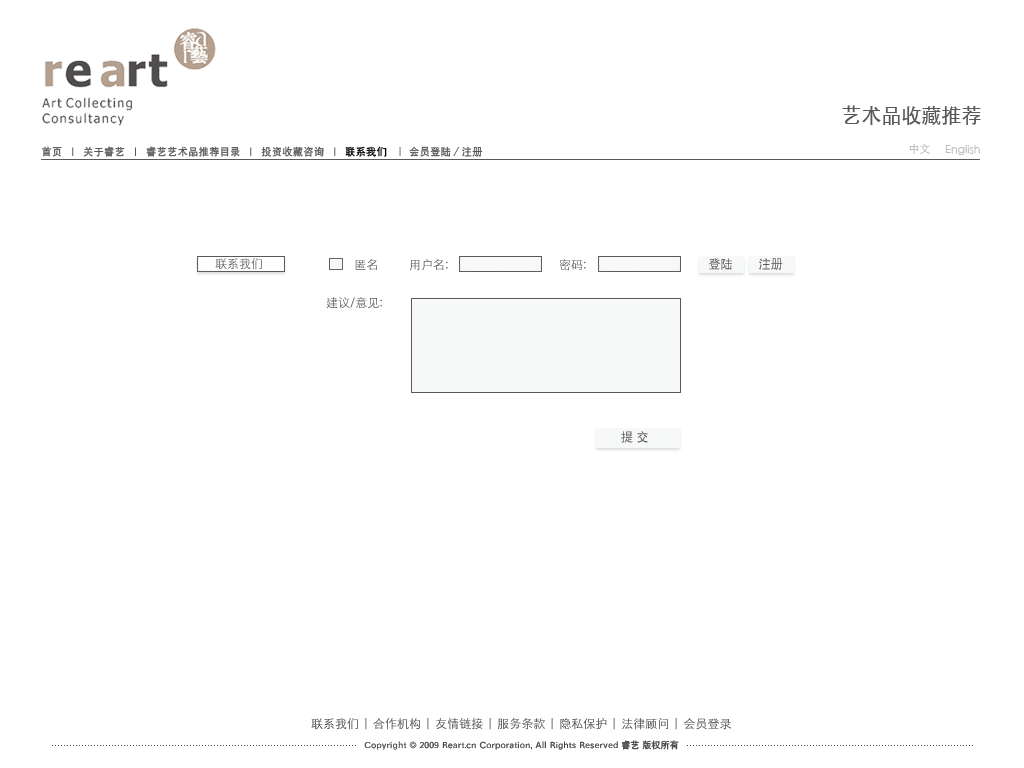
<style>
.page{position:relative;width:1024px;height:768px;background:#ffffff}
.page>*{position:absolute;margin:0}
.t1{font:20px "SIL-Hei-Med-Jian";color:#595757}
.t2{font:10px "SIL-Hei-Med-Jian";letter-spacing:0.05em;color:#5a5858}
.t3{font:10px "SIL-Hei-Med-Jian";letter-spacing:0.05em;color:#000000}
.t4{font:11px "STXihei";color:#bfbfbf}
.t5{font:12px "STXihei";color:#5a5858}
.t6{font:12px "STXihei"}
.t7{font:12px "SIL-Hei-Med-Jian";color:#5a5858}
.t8{font:12px "SIL-Hei-Med-Jian";letter-spacing:0.3em;color:#5a5858}
</style>
<div class="page">
<p class="t1" style="left:842px;top:105px;width:139px;height:20px">艺术品收藏推荐</p>
<p class="t2" style="left:41px;top:146px;width:442px;height:11px">首页  |  关于睿艺  |  睿艺艺术品推荐目录  |  投资收藏咨询  |  <span class="t3">联系我们</span>  ｜ 会员登陆／注册</p>
<p class="t4" style="left:909px;top:144px;width:21px;height:10px">中文</p>
<p class="t4" style="left:945px;top:145px;width:35px;height:10px">English</p>
<p class="t5" style="left:215px;top:258px;width:47px;height:12px">联系我们</p>
<p class="t5" style="left:355px;top:259px;width:22px;height:11px">匿名</p>
<p class="t5" style="left:410px;top:259px;width:38px;height:12px">用户名:</p>
<p class="t6" style="left:559px;top:259px;width:27px;height:12px">密码:</p>
<p class="t7" style="left:709px;top:258px;width:23px;height:12px">登陆</p>
<p class="t7" style="left:759px;top:258px;width:24px;height:12px">注册</p>
<p class="t5" style="left:326px;top:297px;width:56px;height:12px">建议/意见:</p>
<p class="t8" style="left:621px;top:431px;width:27px;height:12px">提交</p>
</div>
